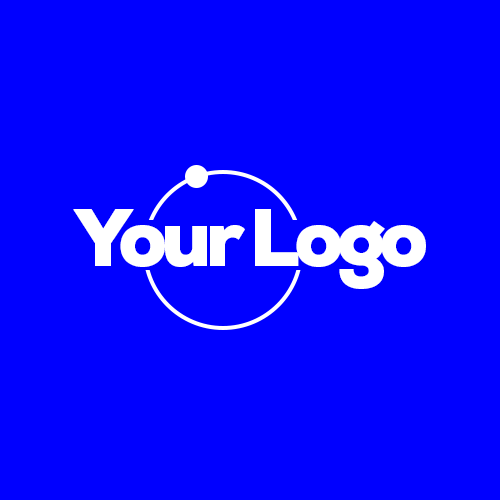
<style>
.page{position:relative;width:500px;height:500px;background:#0000ff}
.page>*{position:absolute;margin:0}
.t1{font:78.9px "FONTSPRINGDEMO-NexaBlackRegular";letter-spacing:-0.075em;color:#ffffff}
</style>
<div class="page">
<p class="t1" style="left:73px;top:209px;width:353px;height:80px">Your Logo</p>
</div>
